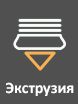
<style>
.page{position:relative;width:78px;height:104px;background:#505050}
.page>*{position:absolute;margin:0}
.t1{font:12px "Calibri-Bold";color:#ffffff}
</style>
<div class="page">
<p class="t1" style="left:6px;top:82px;width:68px;height:14px">Экструзия</p>
</div>
